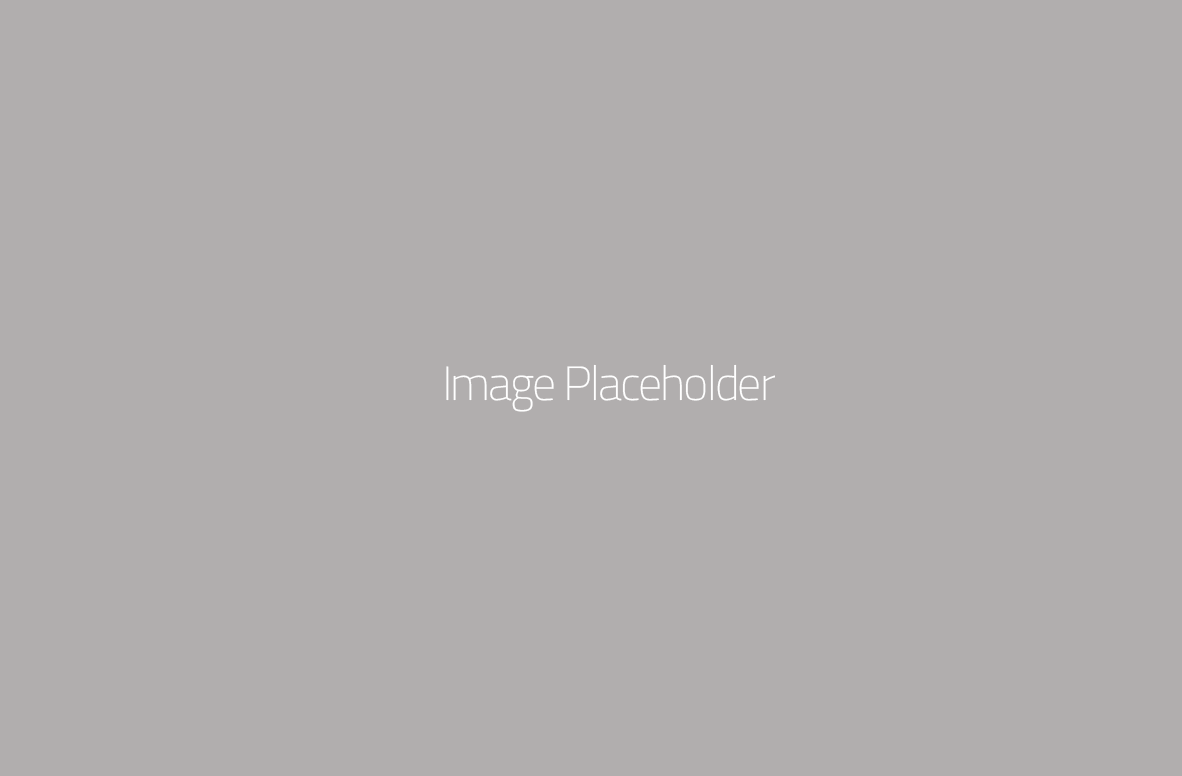
<style>
.page{position:relative;width:1182px;height:776px;background:#b1aeae}
.page>*{position:absolute;margin:0}
.t1{font:48px "TitilliumWeb-ExtraLight";letter-spacing:-0.04em;color:#ffffff}
</style>
<div class="page">
<p class="t1" style="left:446px;top:364px;width:329px;height:48px">Image Placeholder</p>
</div>
